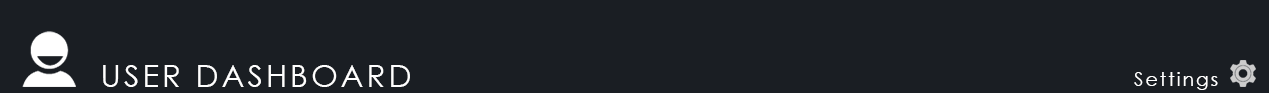
<style>
.page{position:relative;width:1269px;height:93px;background:#1a1e23}
.page>*{position:absolute;margin:0}
.t1{font:30.7px "CenturyGothic";letter-spacing:0.1em;color:#ffffff}
.t2{font:19.2px "CenturyGothic";letter-spacing:0.1em;color:#ffffff}
</style>
<div class="page">
<p class="t1" style="left:103px;top:65px;width:307px;height:22px">USER DASHBOARD</p>
<p class="t2" style="left:1134px;top:72px;width:84px;height:18px">Settings</p>
</div>
